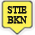
<style>
.page{position:relative;width:35px;height:35px;background:#fcf157}
.page>*{position:absolute;margin:0}
.t1{font:8.7px "TimesNewRomanPSMT";color:#131313;font-weight:bold}
</style>
<div class="page">
<p class="t1" style="left:7px;top:6px;width:20px;height:18px;text-align:center">STIE<br>BKN</p>
</div>
